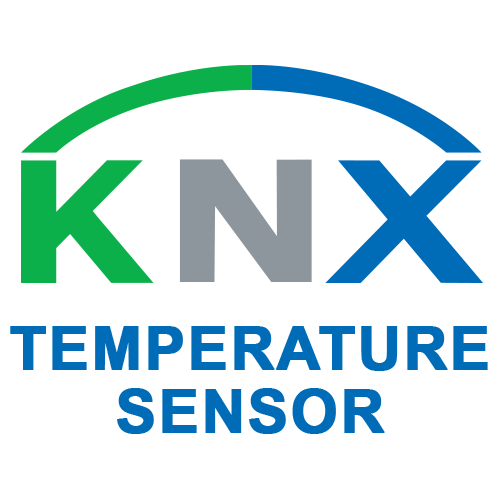
<style>
.page{position:relative;width:500px;height:500px;background:#ffffff}
.page>*{position:absolute;margin:0}
.t1{font:60px "Arial-BoldMT";letter-spacing:0.02em;color:#006bb6;text-transform:uppercase;font-weight:bold}
</style>
<div class="page">
<p class="t1" style="left:10px;top:326px;width:478px;height:45px">TEMPERATURE</p>
<p class="t1" style="left:117px;top:388px;width:268px;height:46px">SENSOR</p>
</div>
